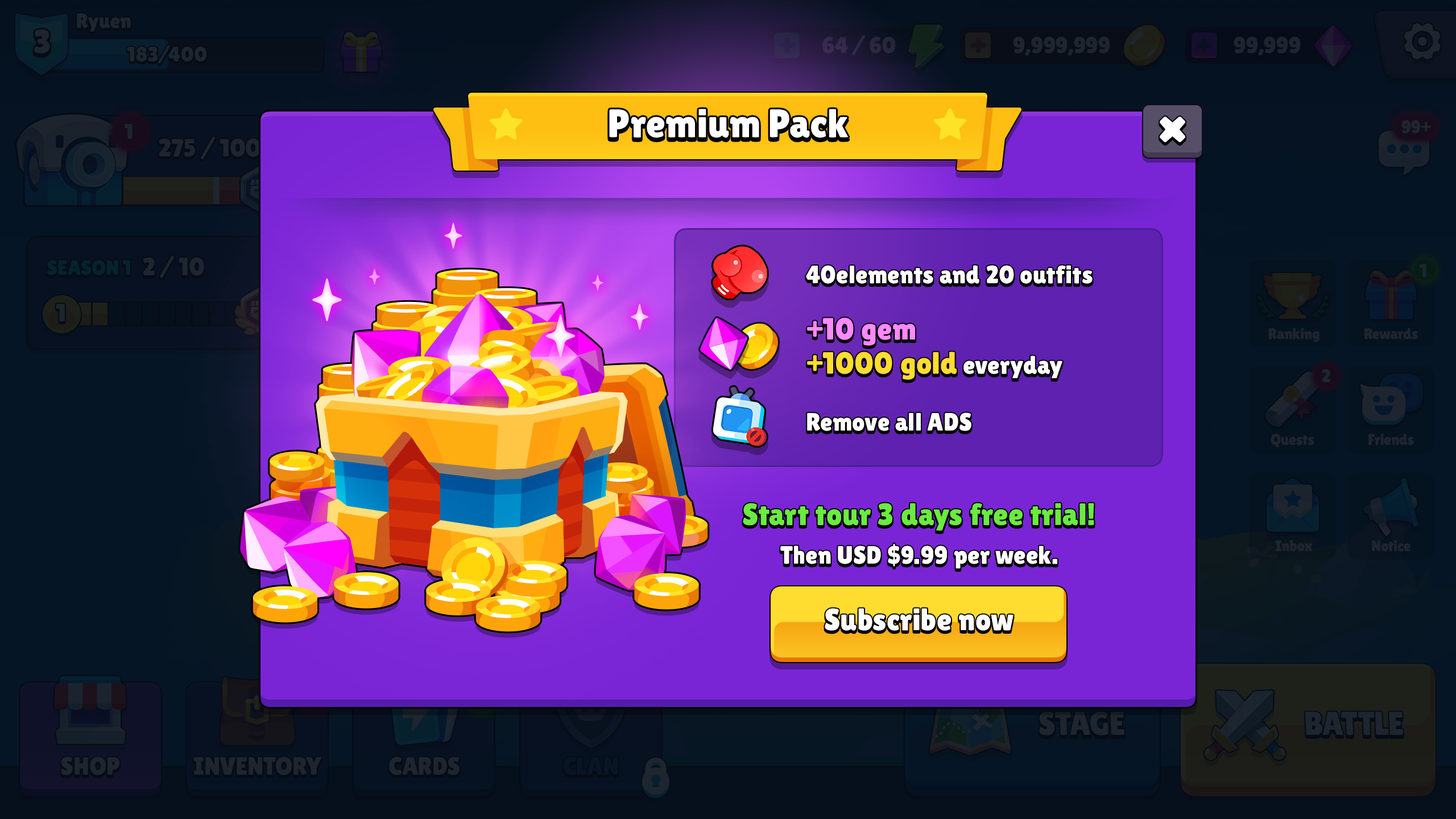
<style>
.page{position:relative;width:1456px;height:819px}
.page>*{position:absolute;margin:0}
.t1{font:39.8px "LilitaOne";color:#ffffff}
.t2{font:25px "LilitaOne";letter-spacing:0.02em;color:#ffffff}
.t3{font:30.7px/34.1px "LilitaOne";letter-spacing:0.02em;color:#ffdc30}
.t4{font:30.7px/34.1px "LilitaOne";letter-spacing:0.02em;color:#ff89ff}
.t5{font:25px/34.1px "LilitaOne";letter-spacing:0.02em;color:#ffffff}
.t6{font:30.7px "LilitaOne";letter-spacing:0.02em;color:#6aeb3f}
.t7{font:30.7px "LilitaOne";letter-spacing:0.02em;color:#ffffff}
</style>
<div class="page">
<p class="t1" style="left:609px;top:109px;width:240px;height:29px">Premium Pack</p>
<p class="t2" style="left:806px;top:265px;width:287px;height:19px">40elements and 20 outfits</p>
<p class="t3" style="left:807px;top:317px;width:255px;height:63px"><span class="t4">+10 gem<br></span>+1000 gold <span class="t5">everyday</span></p>
<p class="t2" style="left:807px;top:412px;width:164px;height:19px">Remove all ADS</p>
<p class="t6" style="left:743px;top:503px;width:351px;height:28px">Start tour 3 days free trial!</p>
<p class="t2" style="left:780px;top:544px;width:277px;height:25px">Then USD $9.99 per week.</p>
<p class="t7" style="left:825px;top:608px;width:188px;height:23px">Subscribe now</p>
</div>
